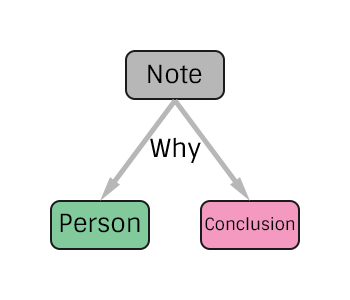
<style>
.page{position:relative;width:350px;height:300px;background:#ffffff}
.page>*{position:absolute;margin:0}
.t1{font:25px "Sintony";color:#000000}
.t2{font:16.7px "Sintony";color:#000000}
</style>
<div class="page">
<p class="t1" style="left:148px;top:64px;width:54px;height:20px">Note</p>
<p class="t1" style="left:150px;top:137px;width:51px;height:27px">Why</p>
<p class="t1" style="left:60px;top:213px;width:80px;height:20px">Person</p>
<p class="t2" style="left:205px;top:217px;width:90px;height:14px">Conclusion</p>
</div>
